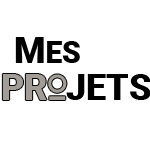
<style>
.page{position:relative;width:150px;height:150px;background:#ffffff}
.page>*{position:absolute;margin:0}
.t1{font:30px "Roboto-Black";color:#000000}
.t2{font:36px "Roboto-Black";color:#000000}
</style>
<div class="page">
<p class="t1" style="left:15px;top:37px;width:65px;height:26px"><span class="t2">M</span>ES</p>
<p class="t2" style="left:66px;top:74px;width:85px;height:26px">JETS</p>
</div>
